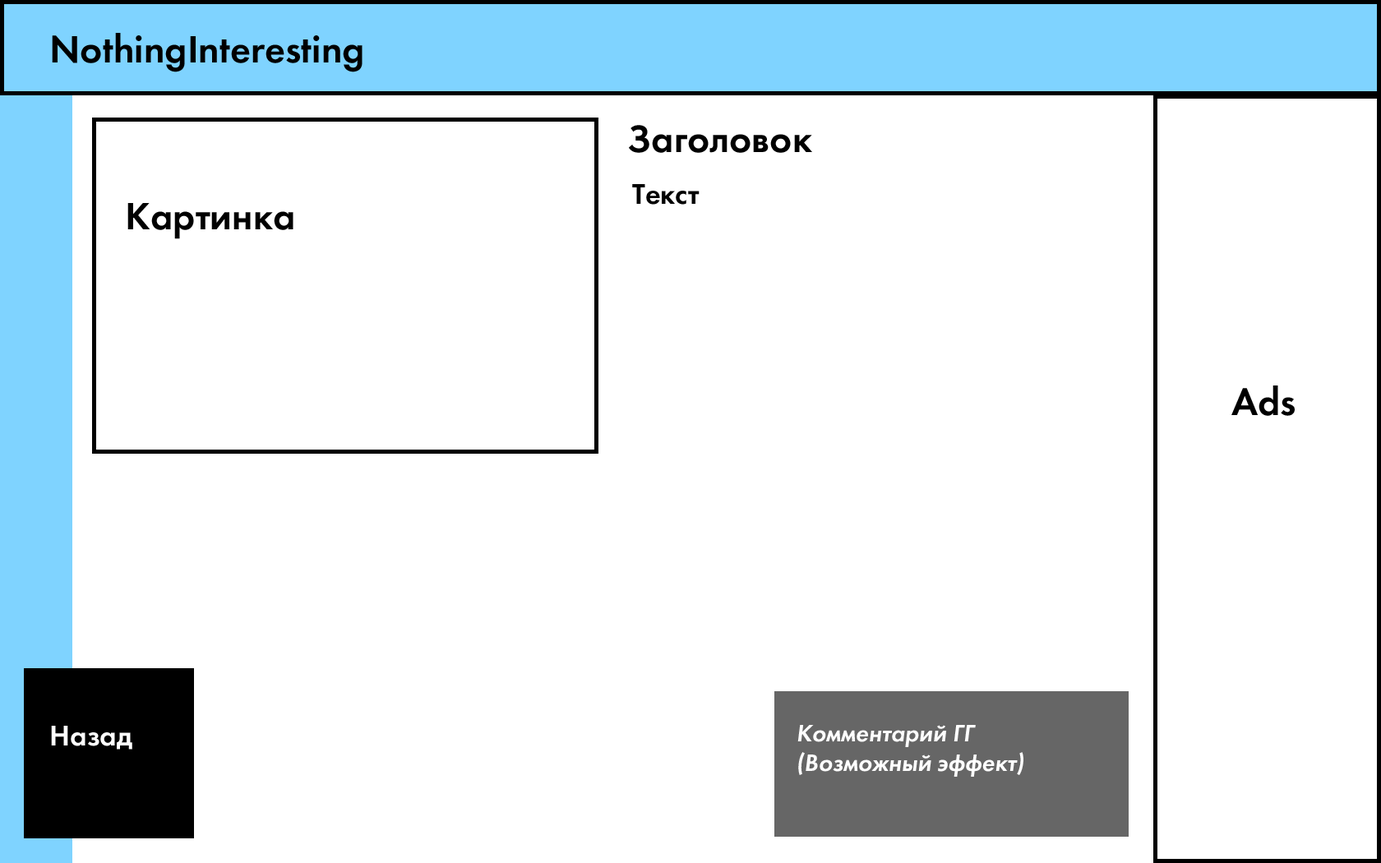
<style>
.page{position:relative;width:1381px;height:863px;background:#ffffff}
.page>*{position:absolute;margin:0}
.t1{font:39.5px "FuturaDemiC";color:#000000}
.t2{font:39.5px "FuturaDemiC";color:#010101}
.t3{font:29.6px "FuturaDemiC";color:#010101}
.t4{font:29.6px "FuturaDemiC";color:#ffffff}
.t5{font:24.7px "FuturaDemiC-Italic";color:#ffffff}
</style>
<div class="page">
<p class="t1" style="left:52px;top:33px;width:311px;height:39px">NothingInteresting</p>
<p class="t1" style="left:52px;top:33px;width:311px;height:39px">NothingInteresting</p>
<p class="t2" style="left:629px;top:125px;width:183px;height:28px">Заголовок</p>
<p class="t3" style="left:632px;top:184px;width:68px;height:21px">Текст</p>
<p class="t2" style="left:127px;top:203px;width:167px;height:36px">Картинка</p>
<p class="t1" style="left:1232px;top:386px;width:63px;height:30px">Ads</p>
<p class="t1" style="left:1232px;top:386px;width:63px;height:30px">Ads</p>
<p class="t4" style="left:51px;top:726px;width:81px;height:24px">Назад</p>
<p class="t4" style="left:51px;top:726px;width:81px;height:24px">Назад</p>
<p class="t5" style="left:798px;top:725px;width:226px;height:52px">Комментарий ГГ<br>(Возможный эффект)</p>
</div>
